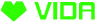
<style>
.page{position:relative;width:95px;height:22px;background:#ffffff}
.page>*{position:absolute;margin:0}
.t1{font:29.3px "DFSoGeiStd-W5";letter-spacing:-0.021em;color:#2fff00;scale:0.88 1}
</style>
<div class="page">
<p class="t1" style="left:34px;top:2px;width:61px;height:18px">VIDA</p>
</div>
